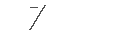
<style>
.page{position:relative;width:128px;height:32px;background:#ffffff}
.page>*{position:absolute;margin:0}
.t1{font:43px "DomDiagonalBT-Regular";letter-spacing:0.075em;color:#ffffff;scale:1.05 1}
</style>
<div class="page">
<p class="t1" style="left:28px;top:3px;width:18px;height:27px">7</p>
</div>
